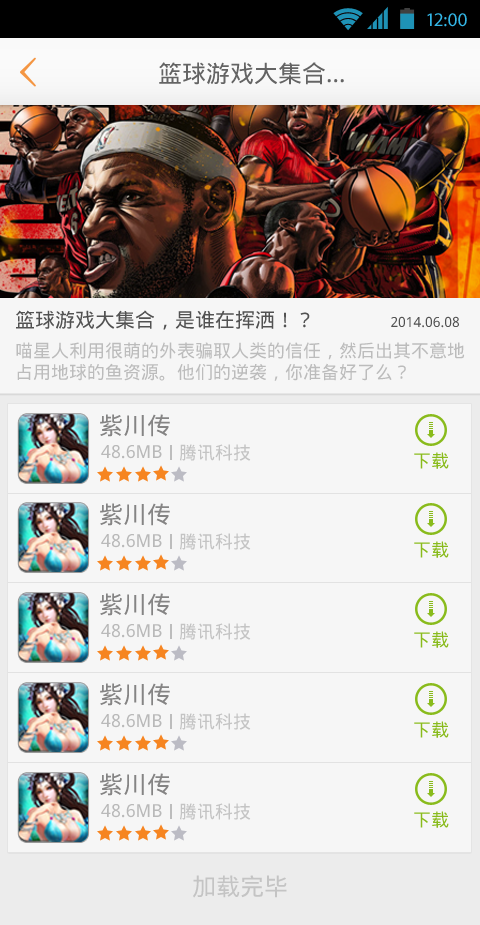
<style>
.page{position:relative;width:480px;height:925px;background:#f6f6f6}
.page>*{position:absolute;margin:0}
.t1{font:19.4px "MyriadPro-Regular";color:#33b5e5}
.t2{font:24px "DroidSansFallback";color:#646464}
.t3{font:20px "DroidSansFallback";color:#525252}
.t4{font:14px "DroidSansFallback";color:#525252}
.t5{font:18px "DroidSansFallback";color:#bcbcbc}
.t6{font:24px "DroidSansFallback";color:#858484}
.t7{font:18px "DroidSansFallback";color:#b9b9b9}
.t8{font:18px "DroidSansFallback";color:#c4c4c4}
.t9{font:18px "DroidSansFallback";color:#89bb1c}
.t10{font:24px "DroidSansFallback";color:#c4c4c4}
</style>
<div class="page">
<p class="t1" style="left:427px;top:13px;width:40px;height:14px">12:00</p>
<p class="t2" style="left:159px;top:62px;width:185px;height:23px">篮球游戏大集合...</p>
<p class="t3" style="left:16px;top:310px;width:443px;height:20px">篮球游戏大集合，是谁在挥洒！？                <span class="t4">2014.06.08</span></p>
<p class="t5" style="left:16px;top:342px;width:449px;height:39px">喵星人利用很萌的外表骗取人类的信任，然后出其不意地<br>占用地球的鱼资源。他们的逆袭，你准备好了么？</p>
<p class="t6" style="left:100px;top:414px;width:70px;height:23px">紫川传</p>
<p class="t7" style="left:101px;top:445px;width:61px;height:14px">48.6MB</p>
<p class="t8" style="left:180px;top:444px;width:71px;height:17px">腾讯科技</p>
<p class="t9" style="left:414px;top:452px;width:35px;height:17px">下载</p>
<p class="t6" style="left:100px;top:503px;width:70px;height:23px">紫川传</p>
<p class="t7" style="left:101px;top:534px;width:61px;height:14px">48.6MB</p>
<p class="t8" style="left:180px;top:533px;width:71px;height:17px">腾讯科技</p>
<p class="t9" style="left:414px;top:541px;width:35px;height:17px">下载</p>
<p class="t6" style="left:100px;top:593px;width:70px;height:23px">紫川传</p>
<p class="t7" style="left:101px;top:624px;width:61px;height:14px">48.6MB</p>
<p class="t8" style="left:180px;top:623px;width:71px;height:17px">腾讯科技</p>
<p class="t9" style="left:414px;top:631px;width:35px;height:17px">下载</p>
<p class="t6" style="left:100px;top:683px;width:70px;height:23px">紫川传</p>
<p class="t8" style="left:180px;top:713px;width:71px;height:17px">腾讯科技</p>
<p class="t7" style="left:101px;top:714px;width:61px;height:14px">48.6MB</p>
<p class="t9" style="left:414px;top:721px;width:35px;height:17px">下载</p>
<p class="t6" style="left:100px;top:773px;width:70px;height:23px">紫川传</p>
<p class="t7" style="left:101px;top:804px;width:61px;height:14px">48.6MB</p>
<p class="t8" style="left:180px;top:803px;width:71px;height:17px">腾讯科技</p>
<p class="t9" style="left:414px;top:811px;width:35px;height:17px">下载</p>
<p class="t10" style="left:193px;top:875px;width:94px;height:23px">加载完毕</p>
</div>
